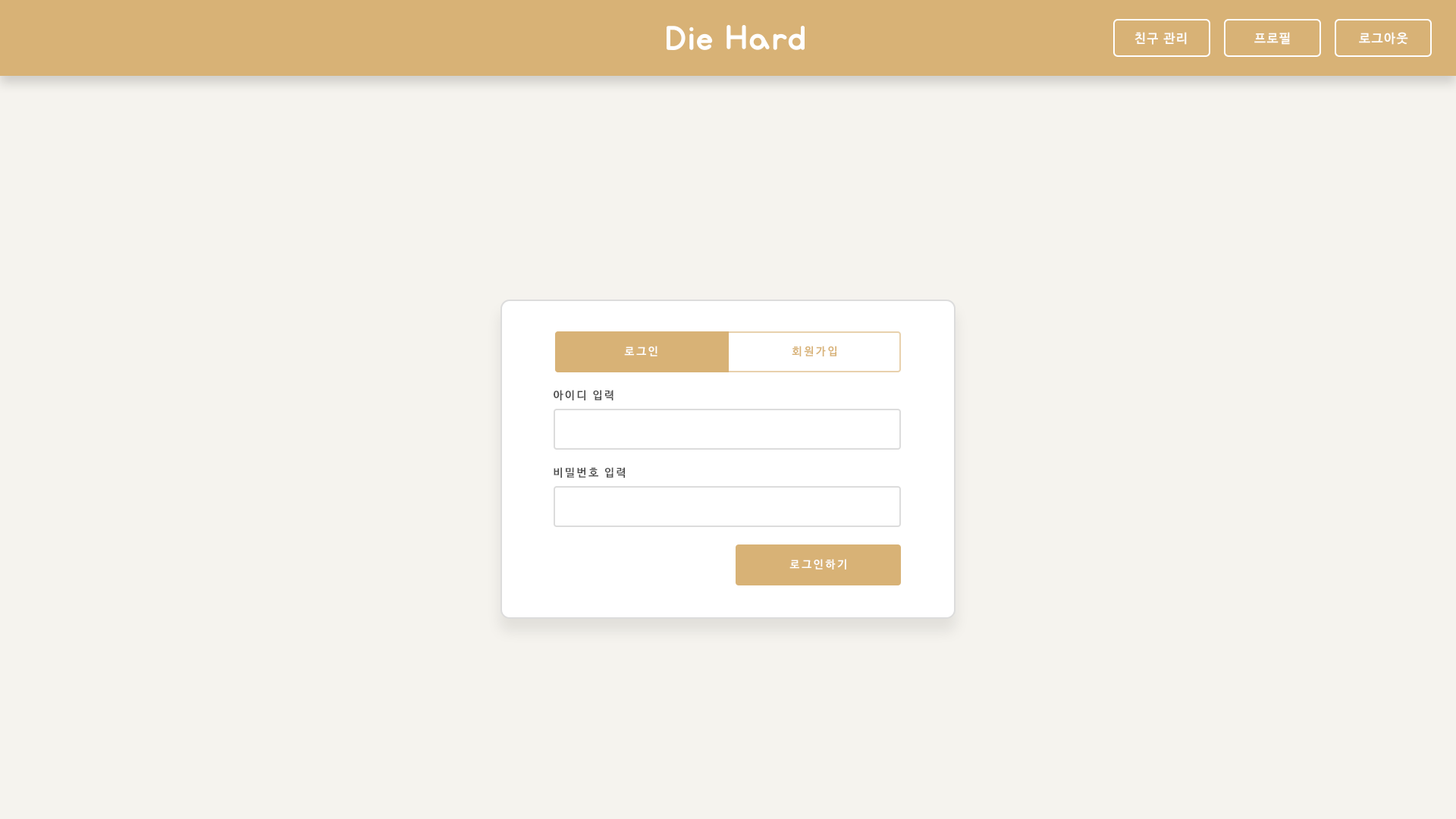
<style>
.page{position:relative;width:1456px;height:819px;background:#f5f3ee}
.page>*{position:absolute;margin:0}
.t1{font:12.6px "NanumBarunGothicBold";letter-spacing:0.1em;color:#fefefe}
.t2{font:12.6px "NanumBarunGothicBold";letter-spacing:0.1em;color:#ffffff}
.t3{font:11px "NanumBarunGothicBold";letter-spacing:0.2em;color:#ffffff}
.t4{font:11px "NanumBarunGothicBold";letter-spacing:0.2em;color:#d8b276}
.t5{font:11.1px "NanumBarunGothicBold";letter-spacing:0.16em;color:#4d4d4d}
</style>
<div class="page">
<p class="t1" style="left:1134px;top:32px;width:53px;height:13px">친구 관리</p>
<p class="t2" style="left:1254px;top:32px;width:36px;height:13px">프로필</p>
<p class="t1" style="left:1359px;top:32px;width:49px;height:13px">로그아웃</p>
<p class="t3" style="left:624px;top:346px;width:33px;height:10px">로그인</p>
<p class="t4" style="left:792px;top:346px;width:44px;height:10px">회원가입</p>
<p class="t5" style="left:554px;top:390px;width:59px;height:10px">아이디 입력</p>
<p class="t5" style="left:554px;top:467px;width:71px;height:11px">비밀번호 입력</p>
<p class="t3" style="left:789px;top:559px;width:57px;height:11px">로그인하기</p>
</div>
